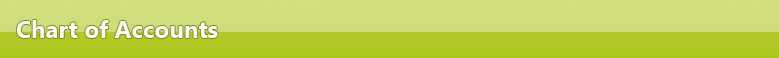
<style>
.page{position:relative;width:779px;height:58px}
.page>*{position:absolute;margin:0}
.t1{font:24px "SegoeUI-Bold";color:#fefefe}
</style>
<div class="page">
<p class="t1" style="left:16px;top:20px;width:202px;height:18px">Chart of Accounts</p>
</div>
